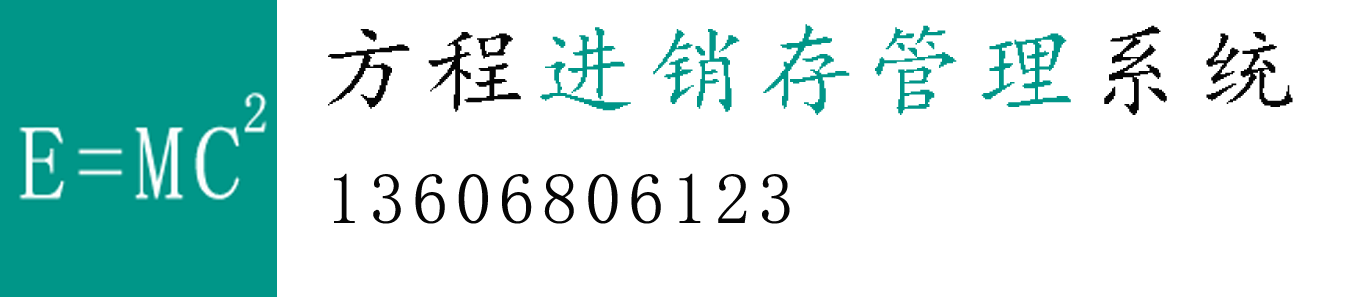
<style>
.page{position:relative;width:1349px;height:297px;background:#ffffff}
.page>*{position:absolute;margin:0}
.t1{font:100px "¿¬Ìå-Regular";letter-spacing:0.1em;color:#009688}
.t2{font:100px "¿¬Ìå-Regular";letter-spacing:0.1em;color:#050505}
.t3{font:72px "SimSun";letter-spacing:0.1em;color:#050505}
</style>
<div class="page">
<p class="t1" style="left:328px;top:24px;width:965px;height:91px"><span class="t2">方程</span>进销存管理<span class="t2">系统</span></p>
<p class="t3" style="left:334px;top:173px;width:456px;height:51px">13606806123</p>
</div>
